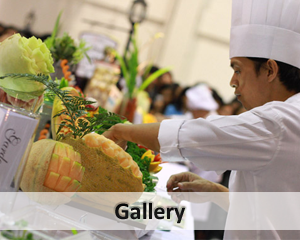
<style>
.page{position:relative;width:300px;height:240px}
.page>*{position:absolute;margin:0}
.t1{font:24px "Calibri-Bold";color:#000000}
</style>
<div class="page">
<p class="t1" style="left:115px;top:202px;width:70px;height:22px">Gallery</p>
</div>
